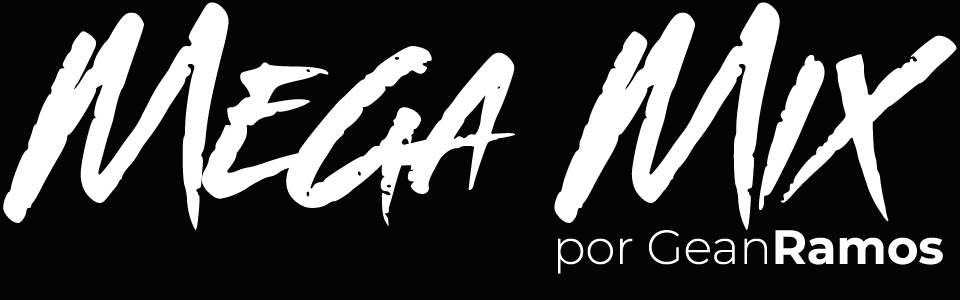
<style>
.page{position:relative;width:960px;height:300px;background:#040404}
.page>*{position:absolute;margin:0}
.t1{font:200px "Grasstrack";color:#ffffff}
.t2{font:48px "Montserrat-Light";color:#ffffff}
.t3{font:48px "Montserrat-Bold";color:#ffffff}
</style>
<div class="page">
<p class="t1" style="left:3px;top:2px;width:954px;height:228px">Mega Mix</p>
<p class="t2" style="left:558px;top:230px;width:385px;height:44px">por Gean<span class="t3">Ramos</span></p>
</div>
